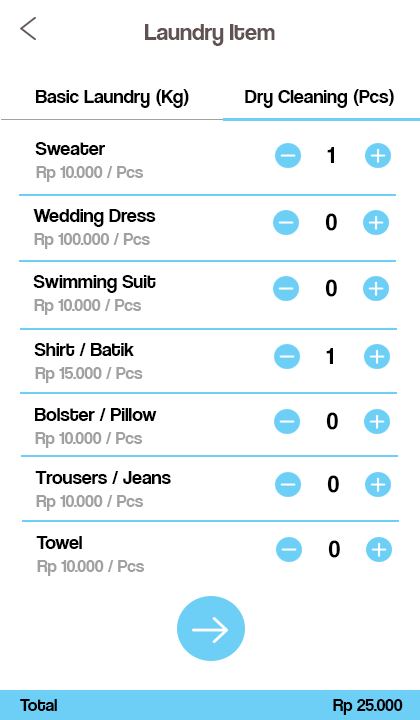
<style>
.page{position:relative;width:420px;height:720px;background:#ffffff}
.page>*{position:absolute;margin:0}
.t1{font:24px "CoolveticaRg-Regular";color:#605252}
.t2{font:20px "CoolveticaRg-Regular";color:#000000}
.t3{font:24px "CoolveticaRg-Regular";color:#000000}
.t4{font:18px "CoolveticaRg-Regular";color:#a1a1a1}
.t5{font:18px "CoolveticaRg-Regular";color:#000000}
</style>
<div class="page">
<p class="t1" style="left:145px;top:24px;width:130px;height:22px">Laundry Item</p>
<p class="t2" style="left:36px;top:89px;width:153px;height:19px">Basic Laundry (Kg)</p>
<p class="t2" style="left:245px;top:89px;width:149px;height:19px">Dry Cleaning (Pcs)</p>
<p class="t2" style="left:35px;top:142px;width:70px;height:13px">Sweater</p>
<p class="t3" style="left:327px;top:147px;width:7px;height:16px">1</p>
<p class="t4" style="left:36px;top:166px;width:107px;height:16px">Rp 10.000 / Pcs</p>
<p class="t2" style="left:33px;top:209px;width:123px;height:18px">Wedding Dress</p>
<p class="t3" style="left:325px;top:213px;width:12px;height:18px">0</p>
<p class="t4" style="left:34px;top:233px;width:116px;height:16px">Rp 100.000 / Pcs</p>
<p class="t2" style="left:33px;top:275px;width:123px;height:18px">Swimming Suit</p>
<p class="t3" style="left:325px;top:279px;width:12px;height:18px">0</p>
<p class="t4" style="left:34px;top:299px;width:107px;height:16px">Rp 10.000 / Pcs</p>
<p class="t2" style="left:34px;top:343px;width:100px;height:13px">Shirt / Batik</p>
<p class="t3" style="left:326px;top:348px;width:7px;height:16px">1</p>
<p class="t4" style="left:35px;top:367px;width:108px;height:16px">Rp 15.000 / Pcs</p>
<p class="t2" style="left:35px;top:408px;width:122px;height:13px">Bolster / Pillow</p>
<p class="t3" style="left:326px;top:412px;width:12px;height:18px">0</p>
<p class="t4" style="left:35px;top:432px;width:107px;height:16px">Rp 10.000 / Pcs</p>
<p class="t2" style="left:35px;top:471px;width:136px;height:13px">Trousers / Jeans</p>
<p class="t3" style="left:327px;top:475px;width:12px;height:18px">0</p>
<p class="t4" style="left:36px;top:495px;width:107px;height:16px">Rp 10.000 / Pcs</p>
<p class="t2" style="left:36px;top:536px;width:46px;height:13px">Towel</p>
<p class="t3" style="left:328px;top:540px;width:12px;height:18px">0</p>
<p class="t4" style="left:37px;top:560px;width:107px;height:16px">Rp 10.000 / Pcs</p>
<p class="t5" style="left:20px;top:699px;width:37px;height:12px">Total</p>
<p class="t5" style="left:333px;top:699px;width:70px;height:16px">Rp 25.000</p>
</div>
